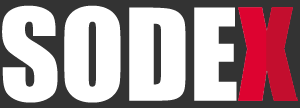
<style>
.page{position:relative;width:300px;height:108px;background:#ffffff}
.page>*{position:absolute;margin:0}
.t1{font:117.4px "Impact";color:#ffffff}
</style>
<div class="page">
<p class="t1" style="left:2px;top:5px;width:295px;height:98px">SODEX</p>
</div>
